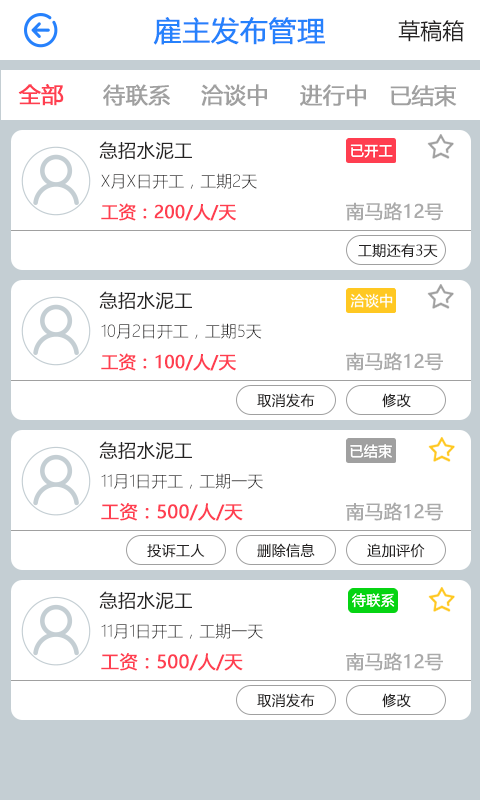
<style>
.page{position:relative;width:480px;height:800px;background:#ffffff}
.page>*{position:absolute;margin:0}
.t1{font:28px "MicrosoftYaHei";color:#2681fc;font-weight:bold}
.t2{font:22px "MicrosoftYaHei";color:#252323}
.t3{font:22px "MicrosoftYaHei";color:#ff3e50;font-weight:bold}
.t4{font:22px "MicrosoftYaHei";color:#a0a0a0;font-weight:bold}
.t5{font:18.3px "MicrosoftYaHeiLight";color:#252323;font-weight:bold}
.t6{font:16px "MicrosoftYaHeiLight";color:#252323}
.t7{font:17.1px "MicrosoftYaHei";color:#ff3e50;font-weight:bold}
.t8{font:18.3px "MicrosoftYaHei";color:#aaaaaa;font-weight:bold}
.t9{font:14px "MicrosoftYaHeiLight";color:#252323;font-weight:bold}
.t10{font:18px "MicrosoftYaHei";color:#ff3e50;font-weight:bold}
</style>
<div class="page">
<p class="t1" style="left:153px;top:17px;width:172px;height:28px">雇主发布管理</p>
<p class="t2" style="left:398px;top:20px;width:66px;height:22px">草稿箱</p>
<p class="t3" style="left:18px;top:84px;width:46px;height:22px">全部</p>
<p class="t4" style="left:103px;top:84px;width:67px;height:22px">待联系</p>
<p class="t4" style="left:201px;top:84px;width:66px;height:22px">洽谈中</p>
<p class="t4" style="left:300px;top:84px;width:66px;height:23px">进行中</p>
<p class="t4" style="left:390px;top:85px;width:67px;height:22px">已结束</p>
<p class="t5" style="left:99px;top:141px;width:93px;height:19px">急招水泥工</p>
<p class="t6" style="left:101px;top:173px;width:156px;height:16px">X月X日开工，工期2天</p>
<p class="t7" style="left:101px;top:203px;width:135px;height:18px">工资：200/人/天</p>
<p class="t8" style="left:346px;top:202px;width:97px;height:19px">南马路12号</p>
<p class="t9" style="left:358px;top:243px;width:80px;height:15px">工期还有3天</p>
<p class="t5" style="left:99px;top:291px;width:93px;height:19px">急招水泥工</p>
<p class="t6" style="left:101px;top:323px;width:161px;height:16px">10月2日开工，工期5天</p>
<p class="t7" style="left:101px;top:353px;width:135px;height:18px">工资：100/人/天</p>
<p class="t8" style="left:346px;top:352px;width:97px;height:19px">南马路12号</p>
<p class="t9" style="left:257px;top:393px;width:58px;height:15px">取消发布</p>
<p class="t9" style="left:382px;top:393px;width:29px;height:15px">修改</p>
<p class="t5" style="left:99px;top:441px;width:93px;height:19px">急招水泥工</p>
<p class="t6" style="left:101px;top:473px;width:162px;height:16px">11月1日开工，工期一天</p>
<p class="t10" style="left:101px;top:503px;width:142px;height:18px">工资：500/人/天</p>
<p class="t8" style="left:346px;top:502px;width:97px;height:19px">南马路12号</p>
<p class="t9" style="left:147px;top:544px;width:58px;height:14px">投诉工人</p>
<p class="t9" style="left:257px;top:543px;width:58px;height:15px">删除信息</p>
<p class="t9" style="left:367px;top:543px;width:58px;height:15px">追加评价</p>
<p class="t5" style="left:99px;top:591px;width:93px;height:19px">急招水泥工</p>
<p class="t6" style="left:101px;top:623px;width:162px;height:16px">11月1日开工，工期一天</p>
<p class="t10" style="left:101px;top:653px;width:142px;height:18px">工资：500/人/天</p>
<p class="t8" style="left:346px;top:652px;width:97px;height:19px">南马路12号</p>
<p class="t9" style="left:257px;top:693px;width:58px;height:15px">取消发布</p>
<p class="t9" style="left:382px;top:693px;width:29px;height:15px">修改</p>
</div>
